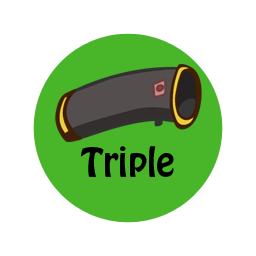
<style>
.page{position:relative;width:256px;height:256px;background:#ffffff}
.page>*{position:absolute;margin:0}
.t1{font:36px "HoboStd";color:#000000}
</style>
<div class="page">
<p class="t1" style="left:81px;top:146px;width:93px;height:31px">Triple</p>
</div>
